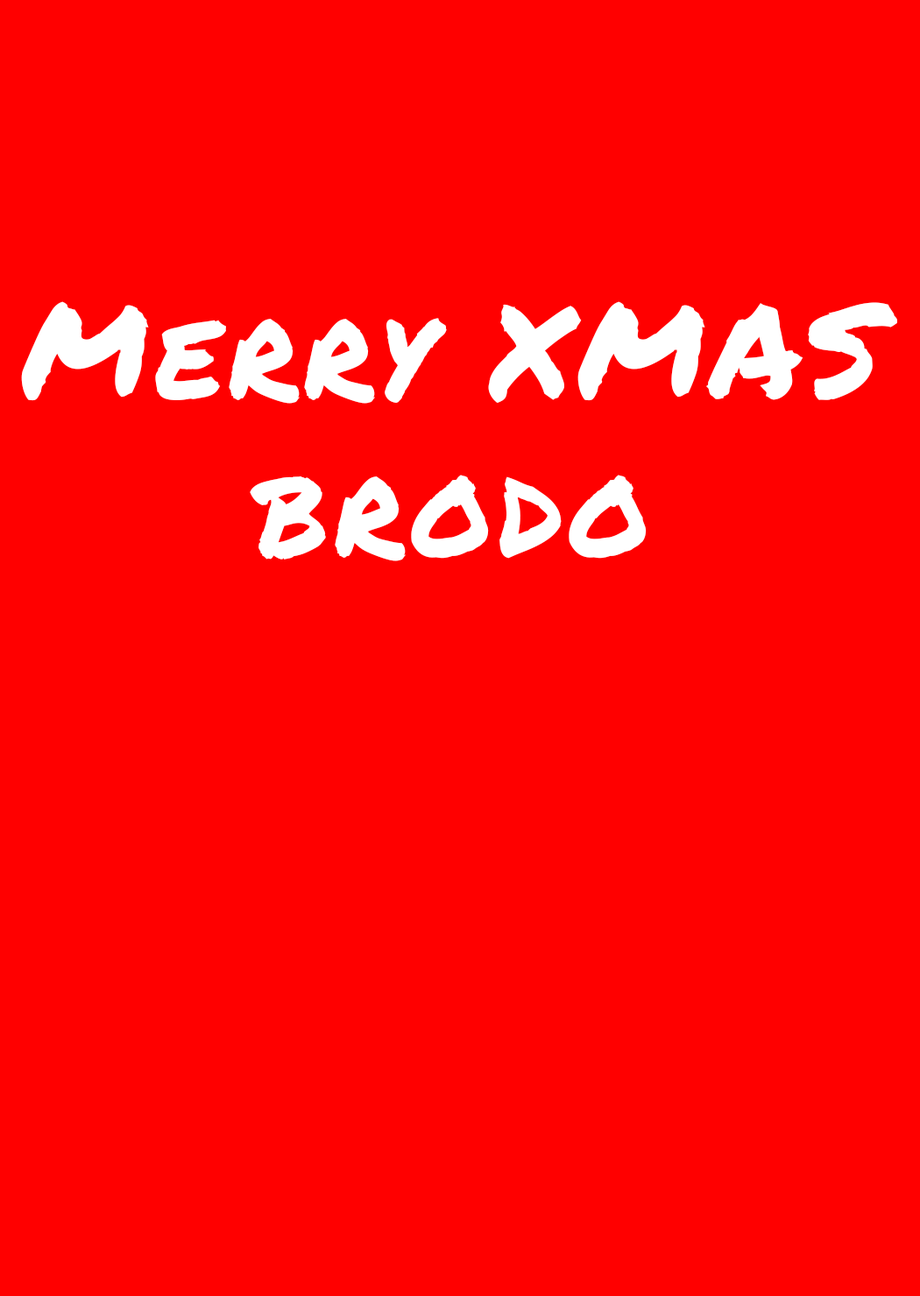
<style>
.page{position:relative;width:920px;height:1296px;background:#ff0000}
.page>*{position:absolute;margin:0}
.t1{font:131.4px "PermanentMarker-Regular";letter-spacing:0.037em;color:#ffffff}
</style>
<div class="page">
<p class="t1" style="left:21px;top:301px;width:876px;height:260px;text-align:center">Merry XMAS<br>brodo</p>
</div>
